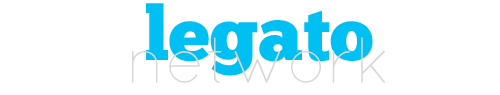
<style>
.page{position:relative;width:500px;height:95px;background:#ffffff}
.page>*{position:absolute;margin:0}
.t1{font:75.4px "ChunkFive";color:#00bff3}
.t2{font:64.8px "QuicksandLight-Regular";color:#d7d7d7}
</style>
<div class="page">
<p class="t1" style="left:146px;top:3px;width:227px;height:73px">legato</p>
<p class="t2" style="left:132px;top:37px;width:253px;height:46px">network</p>
</div>
